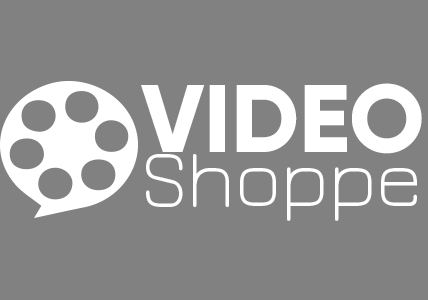
<style>
.page{position:relative;width:428px;height:300px;background:#818181}
.page>*{position:absolute;margin:0}
.t1{font:95.8px "Gilroy-ExtraBold";color:#ffffff}
.t2{font:83.3px "JuraLight";color:#ffffff}
</style>
<div class="page">
<p class="t1" style="left:141px;top:83px;width:281px;height:71px">VIDEO</p>
<p class="t2" style="left:146px;top:154px;width:271px;height:67px">Shoppe</p>
</div>
